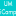
<style>
.page{position:relative;width:16px;height:16px;background:#00cccd}
.page>*{position:absolute;margin:0}
.t1{font:7px "FuturaBT-Medium";scale:0.76 1}
</style>
<div class="page">
<p class="t1" style="left:0px;top:1px;width:16px;height:15px;text-align:center">UM<br>iCamp</p>
</div>
